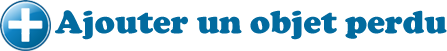
<style>
.page{position:relative;width:447px;height:51px;background:#ffffff}
.page>*{position:absolute;margin:0}
.t1{font:33.3px "CooperBlack";color:#036c9f}
</style>
<div class="page">
<p class="t1" style="left:55px;top:10px;width:392px;height:30px">Ajouter un objet perdu</p>
</div>
